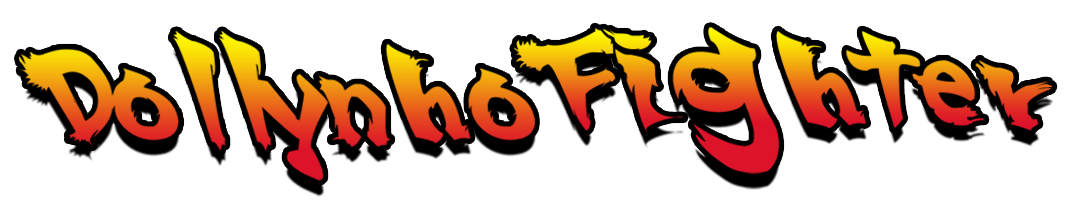
<style>
.page{position:relative;width:1072px;height:200px;background:#ffffff}
.page>*{position:absolute;margin:0}
.t1{font:86.5px "SSF4-ABUKET-Regular";scale:1.2 1}
.t2{font:88.2px "SSF4-ABUKET-Regular";scale:1.1 1}
</style>
<div class="page">
<p class="t1" style="left:514px;top:27px;width:539px;height:147px">Fighter</p>
<p class="t2" style="left:19px;top:31px;width:516px;height:150px">Dollynho</p>
</div>
